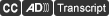
<style>
.page{position:relative;width:109px;height:16px;background:#333333}
.page>*{position:absolute;margin:0}
.t1{font:12.2px "Arial-BoldMT";color:#ffffff;scale:0.87 1}
.t2{font:12.1px "Arial-BoldMT";color:#ffffff}
.t3{font:12px "Arial-BoldMT";color:#ffffff}
.t4{font:11px "ArialMT";color:#ffffff}
</style>
<div class="page">
<p class="t1" style="left:3px;top:3px;width:15px;height:10px">CC</p>
<p class="t2" style="left:25px;top:3px;width:9px;height:9px">A</p>
<p class="t3" style="left:35px;top:3px;width:8px;height:9px">D</p>
<p class="t4" style="left:57px;top:3px;width:49px;height:11px">Transcript</p>
</div>
